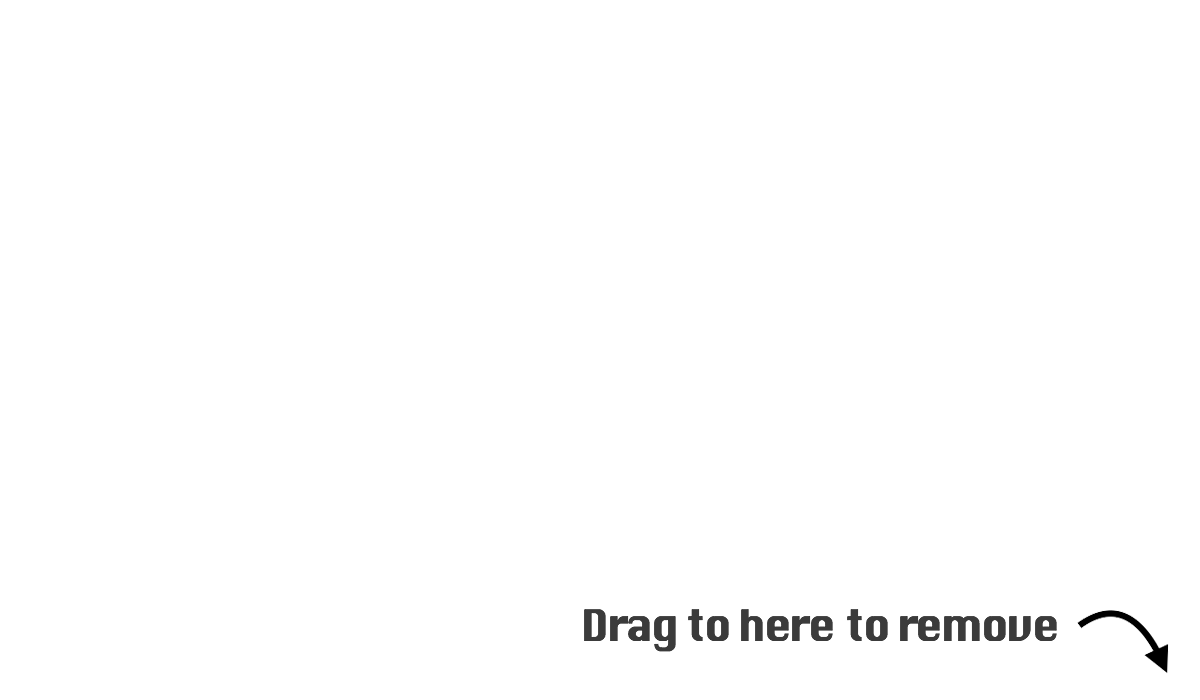
<style>
.page{position:relative;width:1200px;height:700px;background:#ffffff}
.page>*{position:absolute;margin:0}
.t1{font:41.7px "Silom";letter-spacing:-0.05em;color:#3b3b3b}
</style>
<div class="page">
<p class="t1" style="left:584px;top:609px;width:473px;height:43px">Drag to here to remove</p>
</div>
